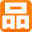
<style>
.page{position:relative;width:32px;height:32px;background:#ffffff}
.page>*{position:absolute;margin:0}
.t1{font:30px "FZLTTHK--GBK1-0";color:#ffffff}
</style>
<div class="page">
<p class="t1" style="left:2px;top:2px;width:27px;height:27px">品</p>
</div>
